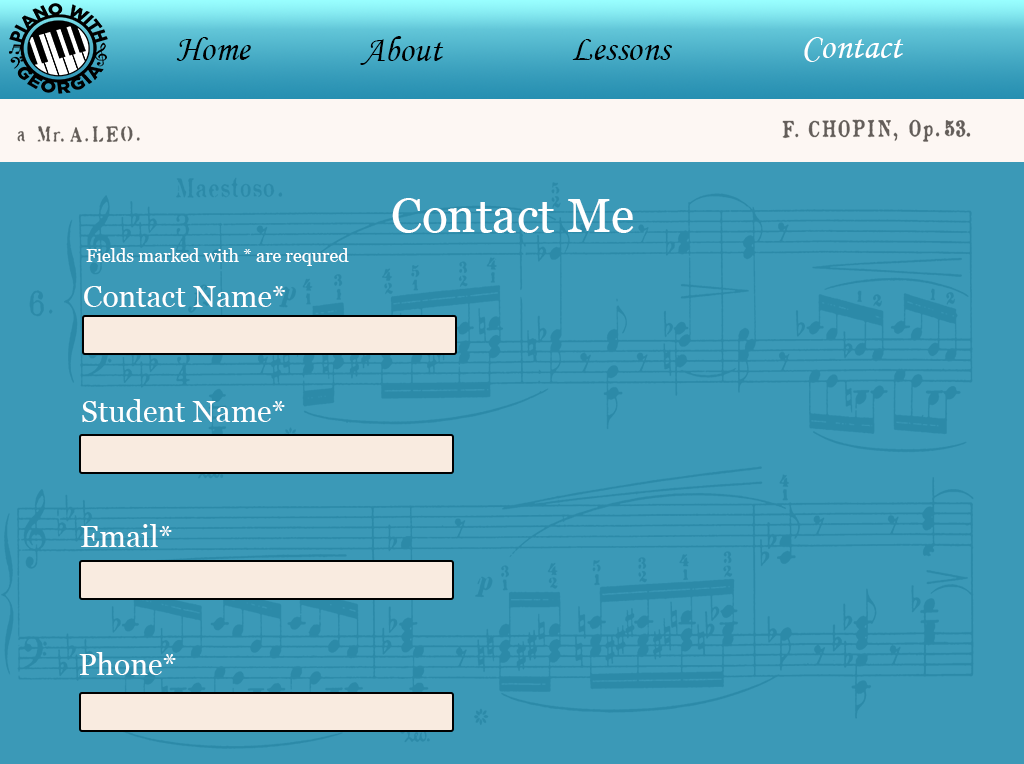
<style>
.page{position:relative;width:1024px;height:764px;background:#3b99b7}
.page>*{position:absolute;margin:0}
.t1{font:36px "MonotypeCorsiva";color:#000000}
.t2{font:36px "MonotypeCorsiva";color:#ffffff}
.t3{font:48px "Georgia";color:#ffffff}
.t4{font:18px "Georgia";color:#ffffff}
.t5{font:30px "Georgia";color:#ffffff}
</style>
<div class="page">
<p class="t1" style="left:176px;top:37px;width:75px;height:24px">Home</p>
<p class="t1" style="left:360px;top:36px;width:84px;height:29px">About</p>
<p class="t1" style="left:572px;top:39px;width:100px;height:21px">Lessons</p>
<p class="t2" style="left:804px;top:37px;width:100px;height:25px">Contact</p>
<p class="t3" style="left:392px;top:198px;width:242px;height:35px">Contact Me</p>
<p class="t4" style="left:86px;top:248px;width:263px;height:18px">Fields marked with * are requred</p>
<p class="t5" style="left:84px;top:286px;width:201px;height:21px">Contact Name*</p>
<p class="t5" style="left:82px;top:399px;width:203px;height:23px">Student Name*</p>
<p class="t5" style="left:81px;top:524px;width:91px;height:23px">Email*</p>
<p class="t5" style="left:79px;top:652px;width:97px;height:23px">Phone*</p>
</div>
